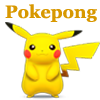
<style>
.page{position:relative;width:100px;height:100px;background:#ffffff}
.page>*{position:absolute;margin:0}
.t1{font:18px "Georgia-Bold";color:#d89800}
</style>
<div class="page">
<p class="t1" style="left:5px;top:4px;width:92px;height:18px">Pokepong</p>
</div>
